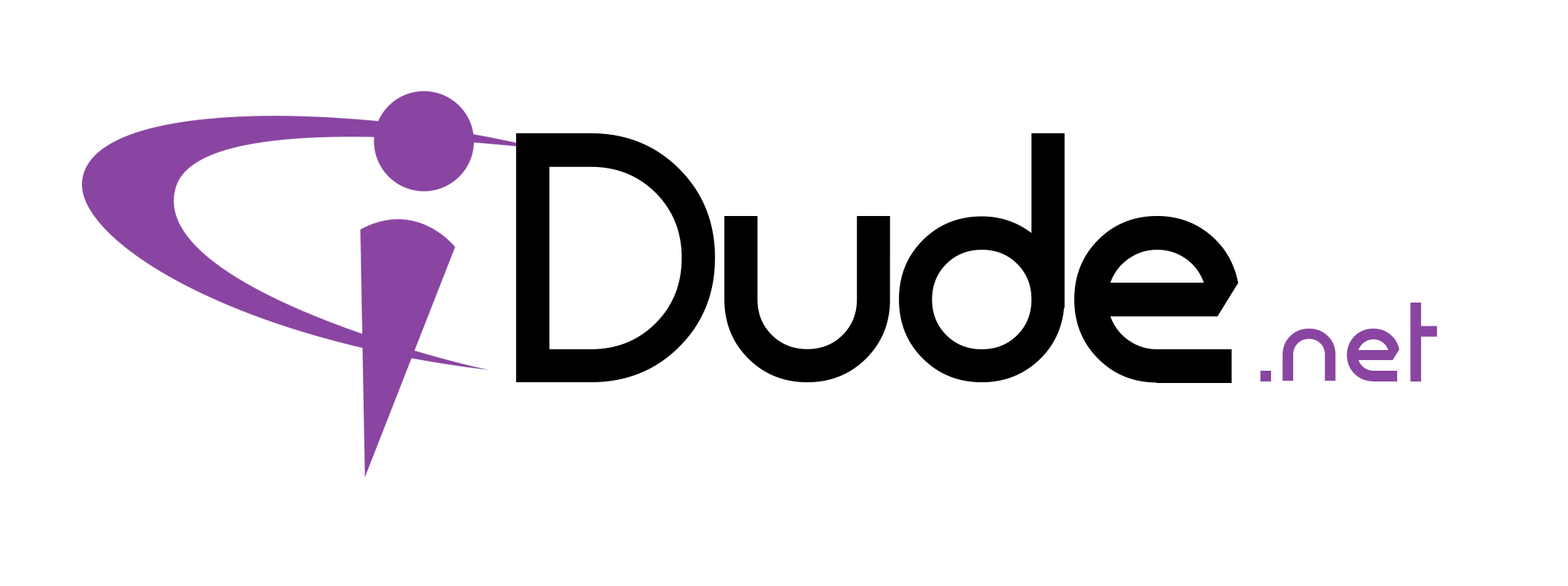
<style>
.page{position:relative;width:1568px;height:586px;background:#ffffff}
.page>*{position:absolute;margin:0}
.t1{font:358.8px "FortuneCity";letter-spacing:-0.025em;color:#000000}
.t2{font:114.1px "FortuneCity";letter-spacing:0.05em;color:#8945a1}
</style>
<div class="page">
<p class="t1" style="left:516px;top:133px;width:723px;height:250px">Dude</p>
<p class="t2" style="left:1260px;top:302px;width:177px;height:79px">.net</p>
</div>
